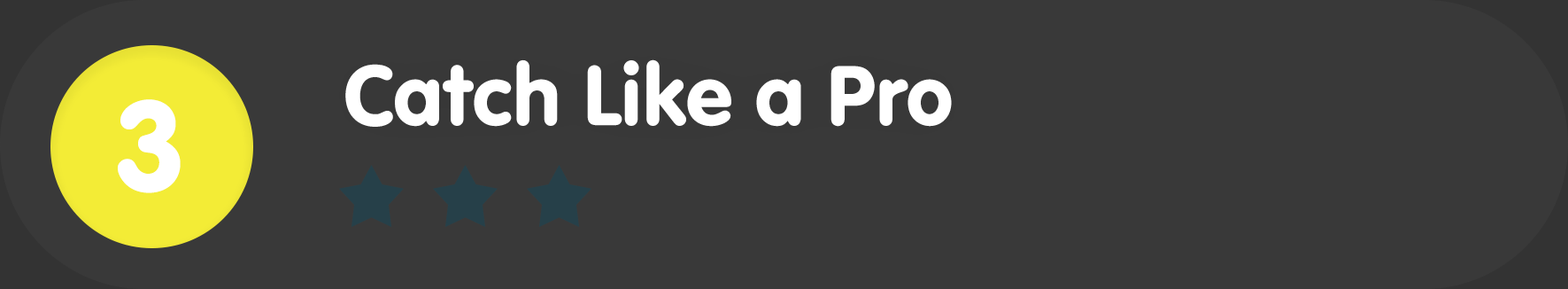
<style>
.page{position:relative;width:1568px;height:289px;background:#393939}
.page>*{position:absolute;margin:0}
.t1{font:88.5px "VAGRundschriftD";color:#ffffff}
.t2{font:132.8px "VAGRundschriftD";color:#ffffff}
</style>
<div class="page">
<p class="t1" style="left:345px;top:59px;width:607px;height:68px">Catch Like a Pro</p>
<p class="t2" style="left:118px;top:99px;width:63px;height:94px">3</p>
</div>
